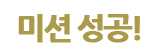
<style>
.page{position:relative;width:160px;height:56px;background:#ffffff}
.page>*{position:absolute;margin:0}
.t1{font:31px "NanumGothicExtraBold";letter-spacing:-0.1em;color:#ab9a4a;font-weight:bold}
</style>
<div class="page">
<p class="t1" style="left:18px;top:14px;width:123px;height:29px">미션 성공!</p>
</div>
